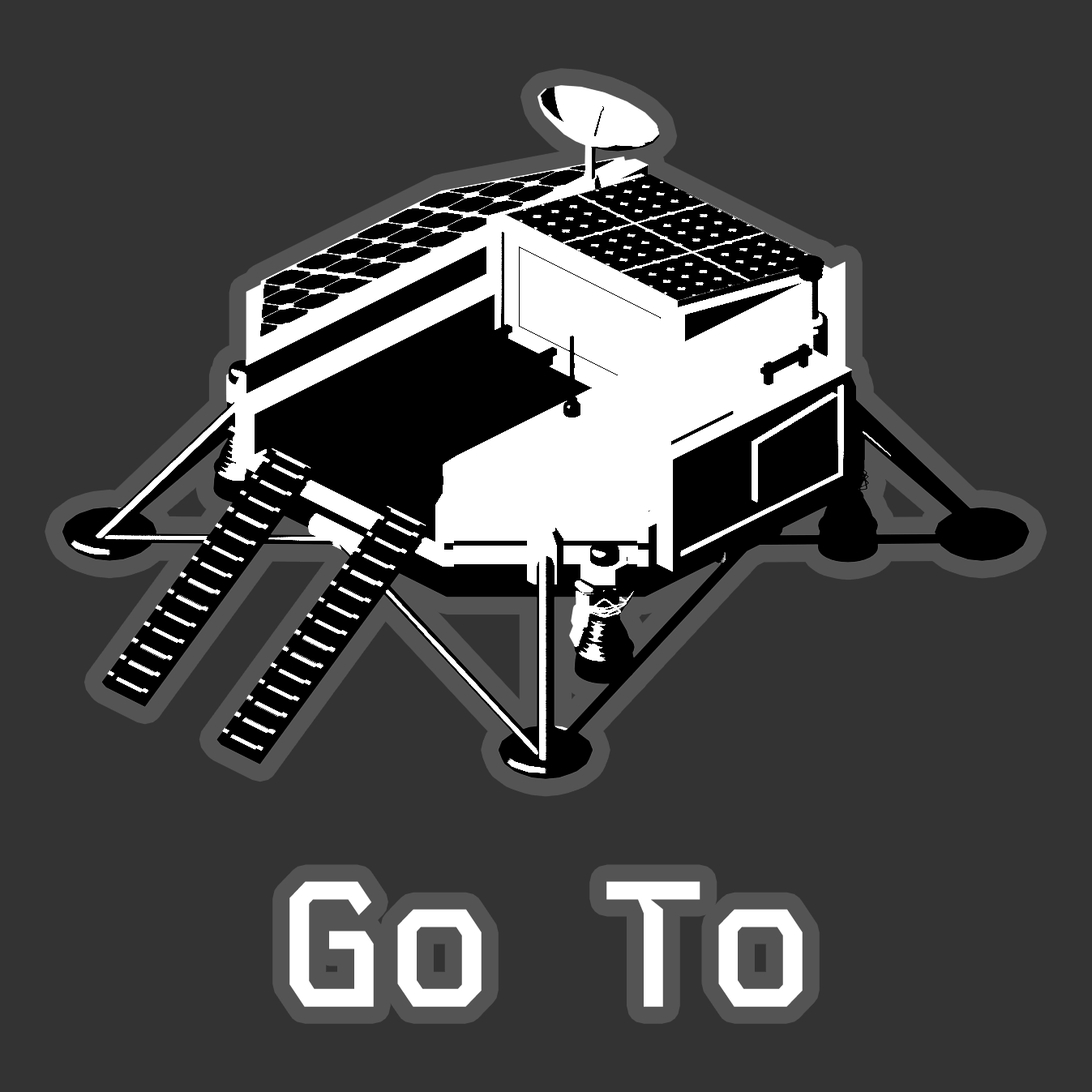
<style>
.page{position:relative;width:1092px;height:1092px;background:#333333}
.page>*{position:absolute;margin:0}
.t1{font:178.3px "KodeMono-SemiBold";color:#ffffff}
</style>
<div class="page">
<p class="t1" style="left:289px;top:881px;width:514px;height:126px">Go To</p>
</div>
